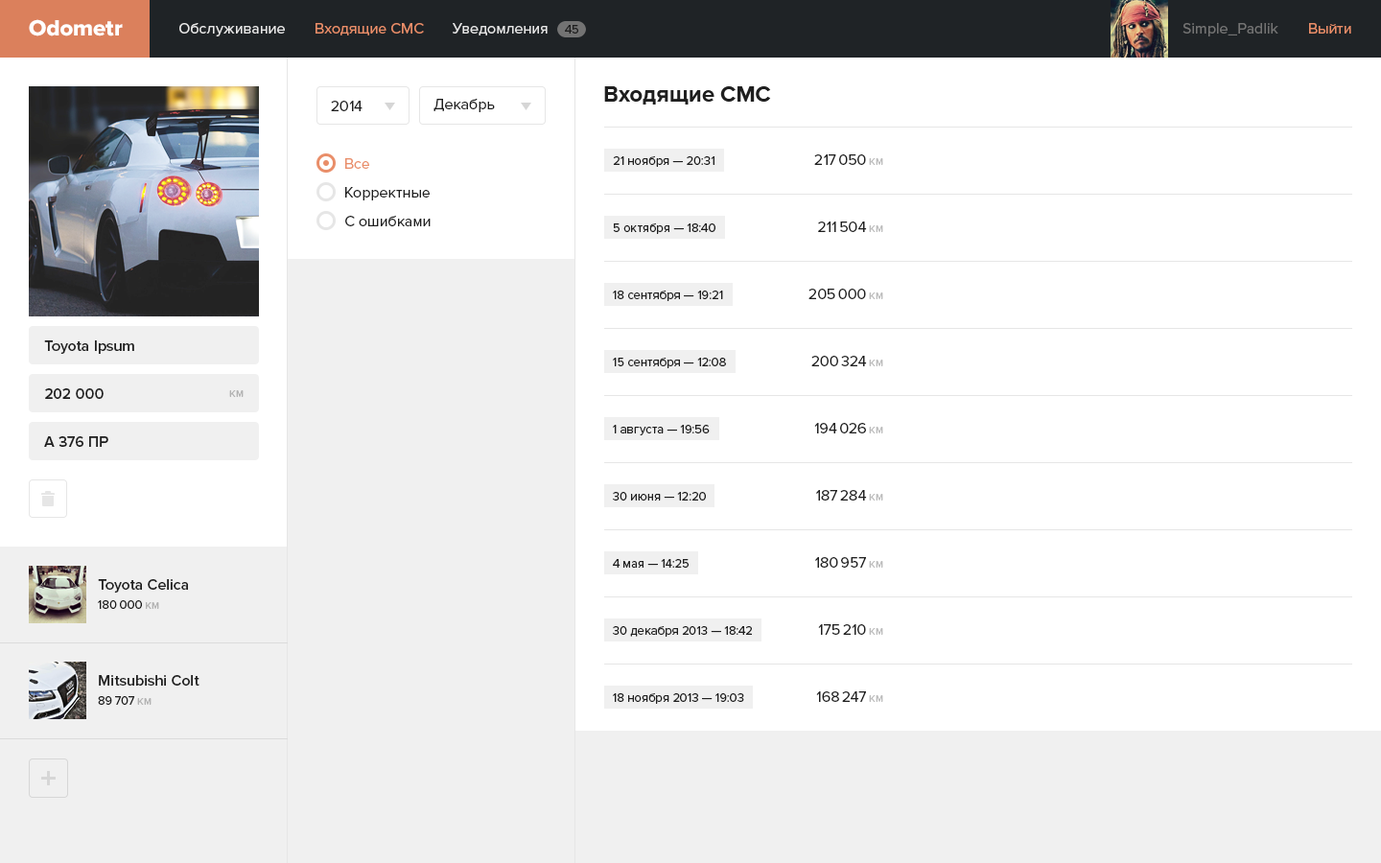
<style>
.page{position:relative;width:1381px;height:863px;background:#ffffff}
.page>*{position:absolute;margin:0}
.t1{font:23px "ProximaNova-Extrabld";color:#ffffff}
.t2{font:15.3px "ProximaNova-Regular";color:#e6e6e6}
.t3{font:15.3px "ProximaNova-Regular";color:#e98e69}
.t4{font:12.5px "ProximaNova-Regular";color:#1f1f1f}
.t5{font:15.3px "ProximaNova-Regular";color:#737373}
.t6{font:23px "ProximaNova-Bold";color:#1f1f1f}
.t7{font:15.3px "ProximaNova-Regular";color:#1f1f1f}
.t8{font:15.3px/28.8px "ProximaNova-Regular";color:#1f1f1f}
.t9{font:15.3px/28.8px "ProximaNova-Regular";color:#e98e69}
.t10{font:12.5px/67.1px "ProximaNova-Regular";color:#1f1f1f}
.t11{font:15.3px/67.1px "ProximaNova-Regular";color:#1f1f1f}
.t12{font:12.5px/67.1px "ProximaNova-Regular";color:#bdbdbd}
.t13{font:15.3px "ProximaNova-Semibold";color:#1f1f1f}
.t14{font:12.5px "ProximaNova-Regular";color:#b3b3b3}
.t15{font:15.3px/19.2px "ProximaNova-Semibold";color:#1f1f1f}
.t16{font:12.5px/19.2px "ProximaNova-Regular";color:#1f1f1f}
.t17{font:12.5px/19.2px "ProximaNova-Regular";color:#b3b3b3}
</style>
<div class="page">
<p class="t1" style="left:29px;top:19px;width:94px;height:17px">Odometr</p>
<p class="t2" style="left:179px;top:23px;width:106px;height:13px">Обслуживание</p>
<p class="t3" style="left:316px;top:23px;width:108px;height:12px">Входящие СМС</p>
<p class="t2" style="left:453px;top:23px;width:95px;height:12px">Уведомления</p>
<p class="t4" style="left:565px;top:25px;width:13px;height:9px">45</p>
<p class="t5" style="left:1183px;top:23px;width:96px;height:13px">Simple_Padlik</p>
<p class="t3" style="left:1309px;top:23px;width:43px;height:11px">Выйти</p>
<p class="t6" style="left:604px;top:86px;width:167px;height:19px">Входящие СМС</p>
<p class="t7" style="left:331px;top:101px;width:32px;height:10px">2014</p>
<p class="t7" style="left:434px;top:99px;width:61px;height:13px">Декабрь</p>
<p class="t8" style="left:345px;top:158px;width:86px;height:68px"><span class="t9">Все<br></span>Корректные<br>С ошибками</p>
<p class="t10" style="left:613px;top:156px;width:139px;height:548px">21 ноября — 20:31<br>5 октября — 18:40 <br>18 сентября — 19:21<br>15 сентября — 12:08<br>1 августа — 19:56<br>30 июня — 12:20<br>4 мая — 14:25<br>30 декабря 2013 — 18:42<br>18 ноября 2013 — 19:03</p>
<p class="t11" style="left:809px;top:154px;width:74px;height:548px;text-align:right">217 050 <span class="t12">км<br></span>211 504 <span class="t12">км<br></span>205 000 <span class="t12">км<br></span>200 324 <span class="t12">км<br></span>194 026 <span class="t12">км<br></span>187 284 <span class="t12">км<br></span>180 957 <span class="t12">км<br></span>175 210 <span class="t12">км<br></span>168 247 <span class="t12">км</span></p>
<p class="t13" style="left:44px;top:341px;width:90px;height:13px">Toyota Ipsum</p>
<p class="t13" style="left:45px;top:388px;width:59px;height:11px">202 000</p>
<p class="t14" style="left:229px;top:390px;width:15px;height:7px">км</p>
<p class="t13" style="left:44px;top:436px;width:64px;height:11px">А 376 ПР</p>
<p class="t15" style="left:98px;top:579px;width:90px;height:30px">Toyota Celica<br><span class="t16">180 000 </span><span class="t17">км</span></p>
<p class="t15" style="left:98px;top:675px;width:102px;height:30px">Mitsubishi Colt<br><span class="t16">89 707 </span><span class="t17">км</span></p>
</div>
